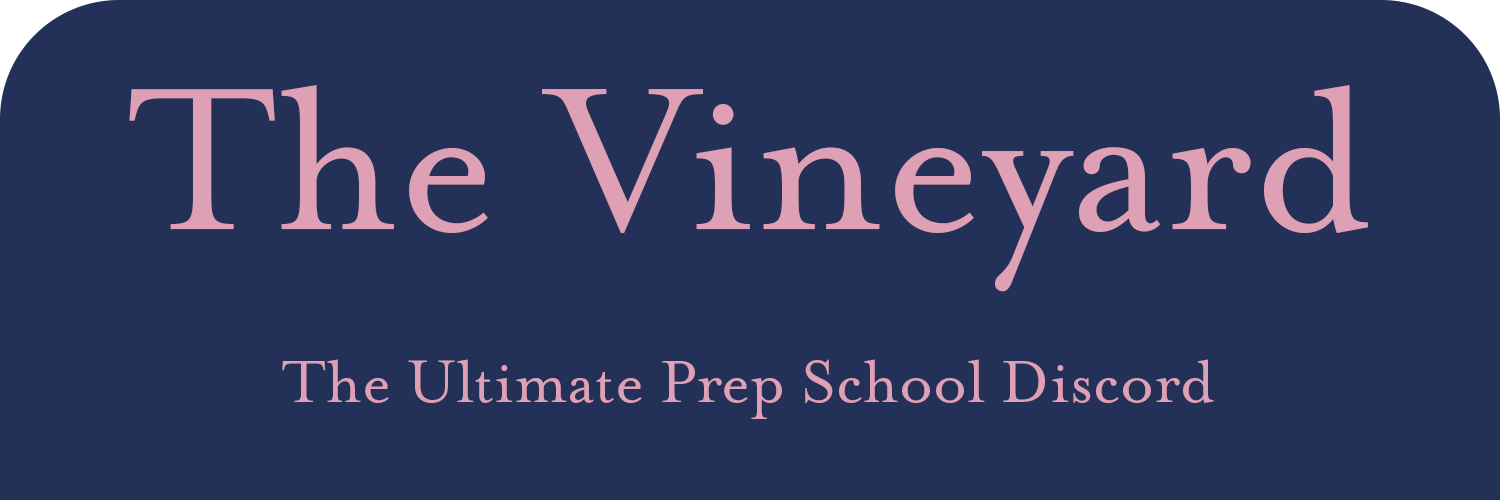
<style>
.page{position:relative;width:1500px;height:500px;background:#233158}
.page>*{position:absolute;margin:0}
.t1{font:232.4px "MrsEavesOT-Roman";color:#dea0b5}
.t2{font:68.4px "MrsEavesOT-Roman";color:#dea0b5}
</style>
<div class="page">
<p class="t1" style="left:129px;top:85px;width:1239px;height:207px">The Vineyard</p>
<p class="t2" style="left:282px;top:359px;width:932px;height:60px">The Ultimate Prep School Discord</p>
</div>
